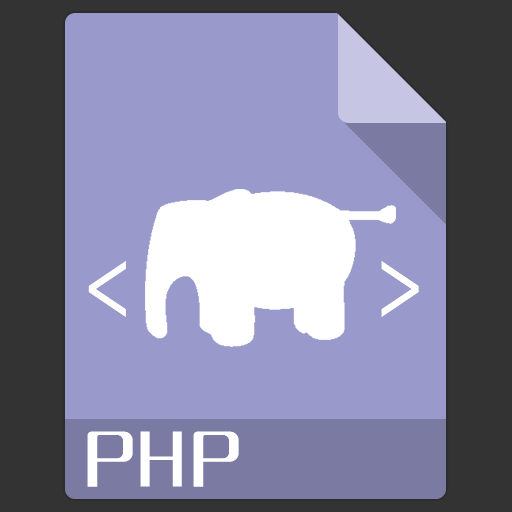
<style>
.page{position:relative;width:512px;height:512px;background:#9999cc}
.page>*{position:absolute;margin:0}
.t1{font:58px "MFLangQian_Noncommercial-Regular";letter-spacing:0.07em;color:#ffffff}
</style>
<div class="page">
<p class="t1" style="left:87px;top:431px;width:152px;height:56px">PHP</p>
</div>
